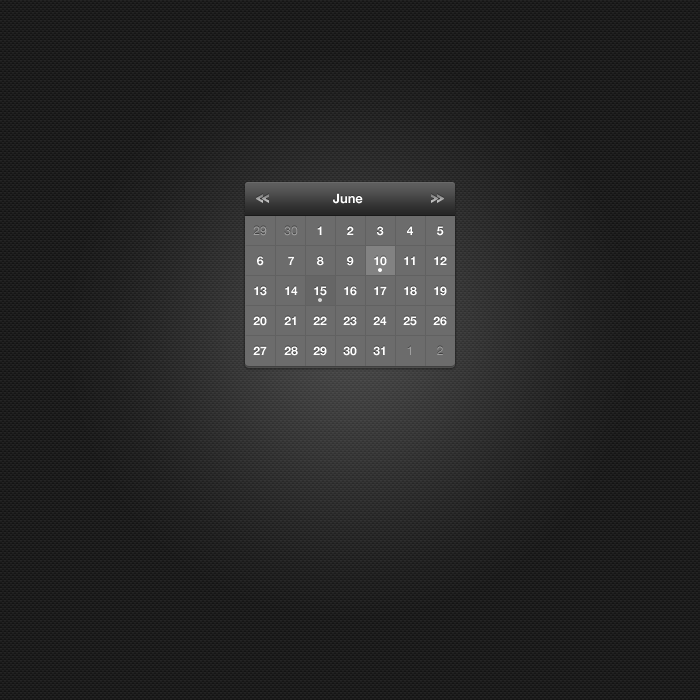
<style>
.page{position:relative;width:700px;height:700px}
.page>*{position:absolute;margin:0}
.t1{font:13px "HelveticaNeue-Bold";color:#ffffff}
.t2{font:12px/30px "HelveticaNeue-Bold";color:#ffffff}
.t3{font:12px/30px "HelveticaNeue";color:#9f9f9f}
</style>
<div class="page">
<p class="t1" style="left:333px;top:193px;width:30px;height:11px">June</p>
<p class="t2" style="left:253px;top:226px;width:14px;height:129px;text-align:center"><span class="t3">29<br></span>6<br>13<br>20<br>27</p>
<p class="t2" style="left:284px;top:226px;width:14px;height:130px;text-align:center"><span class="t3">30<br></span>7<br>14<br>21<br>28</p>
<p class="t2" style="left:313px;top:226px;width:14px;height:130px;text-align:center">1<br>8<br>15<br>22<br>29</p>
<p class="t2" style="left:343px;top:226px;width:14px;height:130px;text-align:center">2<br>9<br>16<br>23<br>30</p>
<p class="t2" style="left:373px;top:226px;width:14px;height:130px;text-align:center">3<br>10<br>17<br>24<br>31</p>
<p class="t2" style="left:403px;top:226px;width:14px;height:129px;text-align:center">4<br>11<br>18<br>25<br><span class="t3">1</span></p>
<p class="t2" style="left:433px;top:226px;width:14px;height:129px;text-align:center">5<br>12<br>19<br>26<br><span class="t3">2</span></p>
</div>
